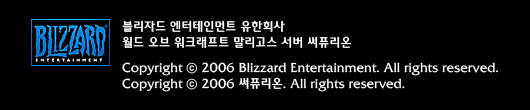
<style>
.page{position:relative;width:530px;height:110px;background:#000000}
.page>*{position:absolute;margin:0}
.t1{font:13px "2002L";color:#ffffff}
</style>
<div class="page">
<p class="t1" style="left:122px;top:20px;width:230px;height:28px">블리자드 엔터테인먼트 유한회사<br>월드 오브 워크래프트 말리고스 서버 써퓨리온</p>
<p class="t1" style="left:122px;top:62px;width:376px;height:30px">Copyright ⓒ 2006 Blizzard Entertainment. All rights reserved. <br>Copyright ⓒ 2006 써퓨리온. All rights reserved.</p>
</div>
